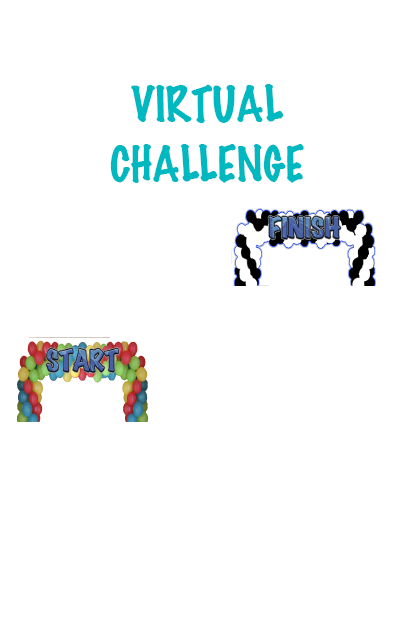
<style>
.page{position:relative;width:414px;height:628px;background:#ffffff}
.page>*{position:absolute;margin:0}
.t1{font:44.6px "MarkerFelt-Thin";color:#00b9c0}
</style>
<div class="page">
<p class="t1" style="left:131px;top:84px;width:153px;height:39px">VIRTUAL</p>
<p class="t1" style="left:110px;top:144px;width:194px;height:39px">CHALLENGE</p>
</div>
